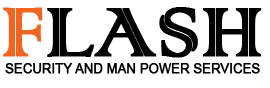
<style>
.page{position:relative;width:270px;height:88px;background:#ffffff}
.page>*{position:absolute;margin:0}
.t1{font:91px "ColonnaMT";color:#000000;font-weight:bold}
.t2{font:91px "ColonnaMT";color:#f26520;font-weight:bold}
.t3{font:12.7px "ArialMT";color:#000000;font-weight:bold}
</style>
<div class="page">
<p class="t1" style="left:3px;top:7px;width:259px;height:51px"><span class="t2">F</span>LASH</p>
<p class="t3" style="left:5px;top:63px;width:255px;height:11px">SECURITY AND MAN POWER SERVICES</p>
</div>
